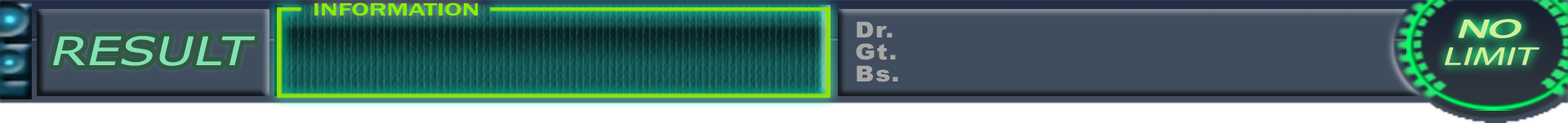
<style>
.page{position:relative;width:1568px;height:123px;background:#404d5e}
.page>*{position:absolute;margin:0}
.t1{font:18px "FranklinGothic-Medium";color:#84f400;scale:1.52 1}
.t2{font:22.1px "Arial-Black";letter-spacing:0.05em;color:#a7a8a7;scale:1.11 1}
.t3{font:25.8px/27.6px "MyriadPro-Regular";color:#d0f09a;font-style:italic;scale:1.6 1}
.t4{font:25.8px/27.6px "MyriadPro-Regular";letter-spacing:-0.05em;color:#d0f09a;font-weight:bold;font-style:italic;scale:1.86 1}
.t5{font:39.2px "MSReferenceSansSerif";color:#82e2b2;font-style:italic;scale:1.33 1}
</style>
<div class="page">
<p class="t1" style="left:314px;top:2px;width:164px;height:14px">INFORMATION</p>
<p class="t2" style="left:856px;top:21px;width:42px;height:61px">Dr.<br>Gt.<br>Bs.</p>
<p class="t3" style="left:1445px;top:19px;width:94px;height:46px;text-align:center"><span class="t4">NO<br></span>LIMIT</p>
<p class="t5" style="left:53px;top:36px;width:203px;height:30px">RESULT</p>
</div>
